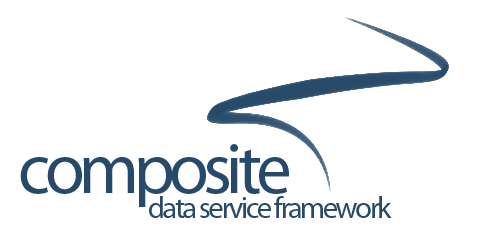
<style>
.page{position:relative;width:480px;height:237px;background:#ffffff}
.page>*{position:absolute;margin:0}
.t1{font:72px "MyriadPro-Regular";letter-spacing:-0.075em;color:#274a6a}
.t2{font:30px "MyriadPro-Regular";letter-spacing:-0.075em;color:#274a6a}
</style>
<div class="page">
<p class="t1" style="left:20px;top:144px;width:269px;height:63px">composite</p>
<p class="t2" style="left:149px;top:196px;width:243px;height:22px">data service framework</p>
</div>
